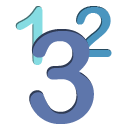
<style>
.page{position:relative;width:128px;height:128px;background:#ffffff}
.page>*{position:absolute;margin:0}
.t1{font:81.3px "ArialRoundedMTBold";color:#85dce2;scale:0.93 1}
.t2{font:71.1px "ArialRoundedMTBold";color:#4a95bf}
.t3{font:129.1px "ArialRoundedMTBold";color:#5e76ab}
</style>
<div class="page">
<p class="t1" style="left:15px;top:6px;width:28px;height:59px">1</p>
<p class="t2" style="left:75px;top:6px;width:37px;height:51px">2</p>
<p class="t3" style="left:29px;top:29px;width:65px;height:95px">3</p>
</div>
